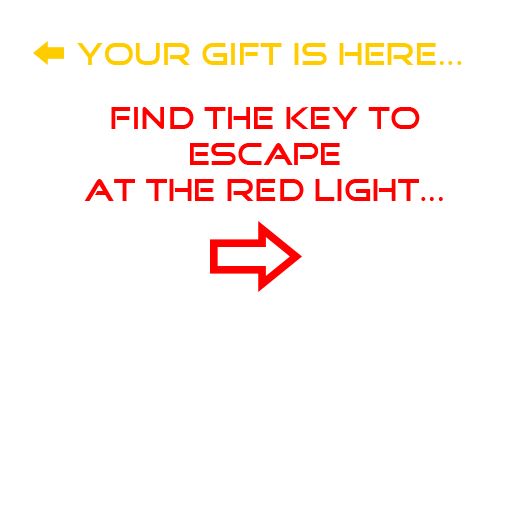
<style>
.page{position:relative;width:512px;height:512px;background:#ffffff}
.page>*{position:absolute;margin:0}
.t1{font:30px "GoodTimes";color:#ffcc00}
.t2{font:30px "GoodTimes";color:#ff0000}
</style>
<div class="page">
<p class="t1" style="left:77px;top:43px;width:385px;height:22px">Your Gift is Here...</p>
<p class="t2" style="left:84px;top:107px;width:359px;height:94px;text-align:center">Find the Key To<br>Escape <br>at the Red Light...</p>
</div>
